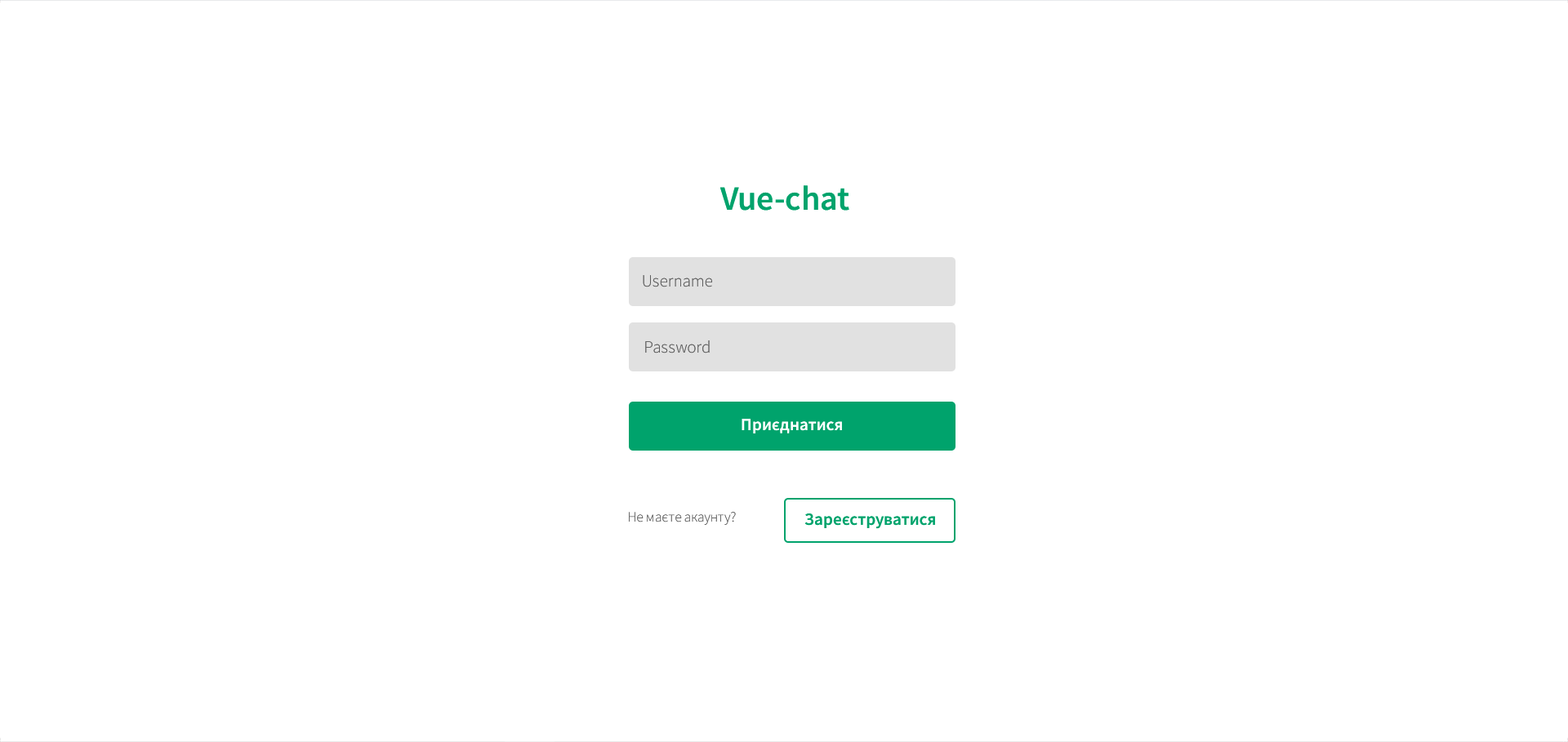
<style>
.page{position:relative;width:1568px;height:742px;background:#ffffff}
.page>*{position:absolute;margin:0}
.t1{font:58.8px "SourceSansPro-SemiBold";color:#00a36c}
.t2{font:29.4px "SourceSansPro-Light";color:#5d5d5d}
.t3{font:29.4px "SourceSansPro-SemiBold";color:#ffffff}
.t4{font:24.5px "SourceSansPro-Light";color:#5d5d5d}
.t5{font:29.4px "SourceSansPro-SemiBold";color:#00a36c}
</style>
<div class="page">
<p class="t1" style="left:719px;top:185px;width:130px;height:26px">Vue-chat</p>
<p class="t2" style="left:643px;top:275px;width:69px;height:12px">Username</p>
<p class="t2" style="left:645px;top:341px;width:65px;height:13px">Password</p>
<p class="t3" style="left:742px;top:419px;width:100px;height:15px">Приєднатися</p>
<p class="t4" style="left:629px;top:512px;width:107px;height:13px">Не маєте акаунту?</p>
<p class="t5" style="left:804px;top:514px;width:131px;height:15px">Зареєструватися</p>
</div>
